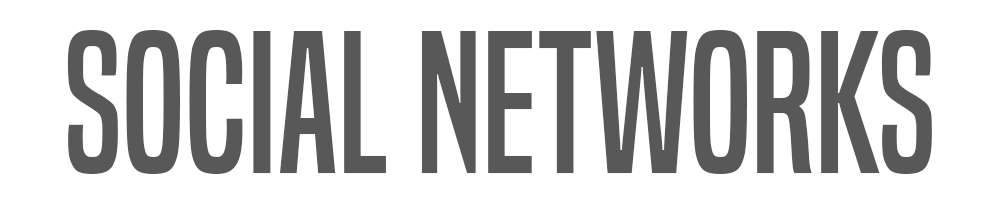
<style>
.page{position:relative;width:1000px;height:200px;background:#ffffff}
.page>*{position:absolute;margin:0}
.t1{font:187.5px "BuiltTitlingRg-Regular";color:#585858}
</style>
<div class="page">
<p class="t1" style="left:67px;top:30px;width:865px;height:144px">social networks</p>
</div>
